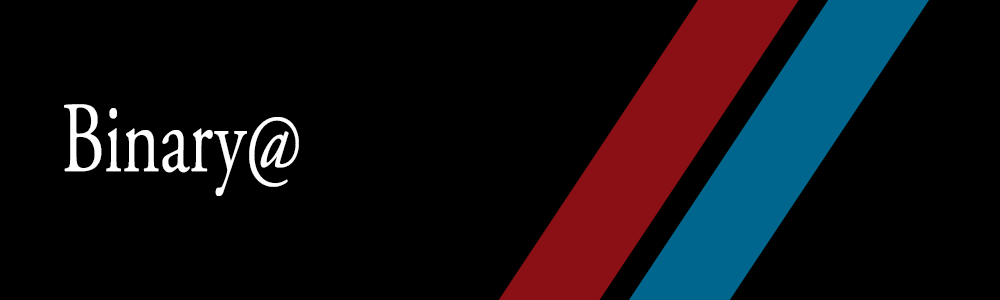
<style>
.page{position:relative;width:1000px;height:300px;background:#000000}
.page>*{position:absolute;margin:0}
.t1{font:100.8px "AGaramondPro-Regular";color:#fefefe;scale:0.71 1}
</style>
<div class="page">
<p class="t1" style="left:64px;top:104px;width:235px;height:92px">Binary@</p>
</div>
